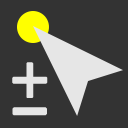
<style>
.page{position:relative;width:128px;height:128px;background:#333333}
.page>*{position:absolute;margin:0}
.t1{font:70px "OpenSans-Regular";color:#e6e6e6;font-weight:bold}
.t2{font:70px "OpenSans-Regular";color:#e6e6e6;font-weight:bold;scale:1.87 1}
</style>
<div class="page">
<p class="t1" style="left:12px;top:62px;width:36px;height:36px">+</p>
<p class="t2" style="left:12px;top:107px;width:35px;height:9px">-</p>
</div>
